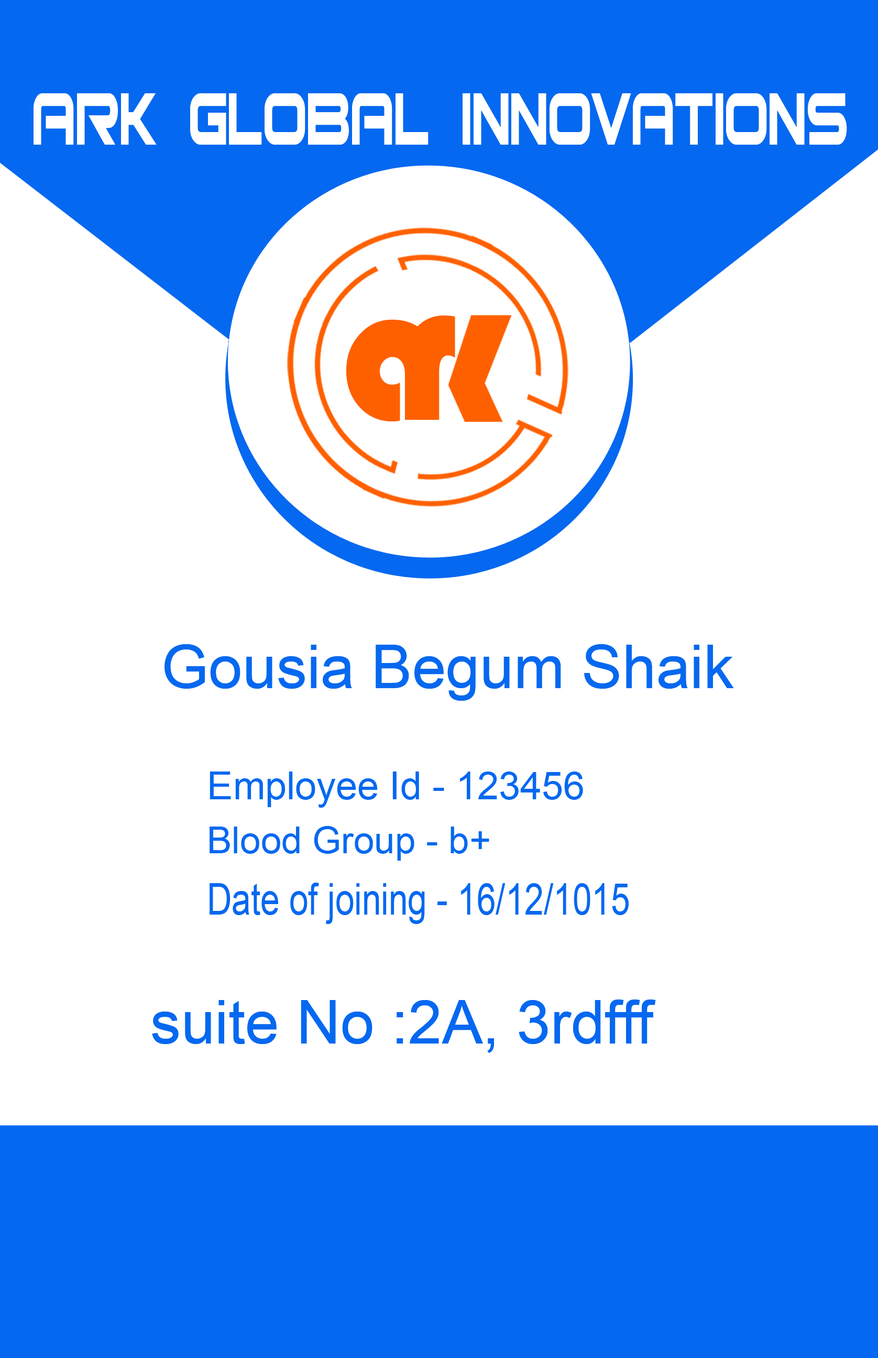
<style>
.page{position:relative;width:878px;height:1358px;background:#ffffff}
.page>*{position:absolute;margin:0}
.t1{font:99.9px "Bitsumishi";color:#ffffff;scale:0.63 1}
.t2{font:209.4px "Bauhaus93";color:#fe6000;scale:0.89 1}
.t3{font:200.8px "Bauhaus93";color:#fe6000;scale:0.9 1}
.t4{font:61px "ArialMT";color:#0568f0}
.t5{font:38.6px "ArialMT";color:#0568f0}
.t6{font:37.1px "ArialMT";color:#0568f0}
.t7{font:43.9px "ArialMT";color:#0568f0;scale:0.79 1}
</style>
<div class="page">
<p class="t1" style="left:33px;top:93px;width:814px;height:52px">ARK Global innovations</p>
<p class="t2" style="left:405px;top:315px;width:50px;height:105px">r</p>
<p class="t3" style="left:346px;top:319px;width:92px;height:102px">a</p>
<p class="t4" style="left:165px;top:644px;width:569px;height:57px">Gousia Begum Shaik</p>
<p class="t5" style="left:210px;top:771px;width:373px;height:37px">Employee Id - 123456</p>
<p class="t6" style="left:210px;top:826px;width:279px;height:34px">Blood Group - b+</p>
<p class="t7" style="left:210px;top:882px;width:419px;height:42px">Date of joining - 16/12/1015</p>
<p class="t4" style="left:152px;top:999px;width:504px;height:54px">suite No :2A, 3rdfff</p>
</div>
